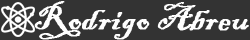
<style>
.page{position:relative;width:250px;height:40px;background:#333333}
.page>*{position:absolute;margin:0}
.t1{font:36px "BlackadderITC-Regular";color:#fefefe;font-weight:bold;scale:1.07 1}
</style>
<div class="page">
<p class="t1" style="left:34px;top:1px;width:215px;height:39px">Rodrigo Abreu</p>
</div>
